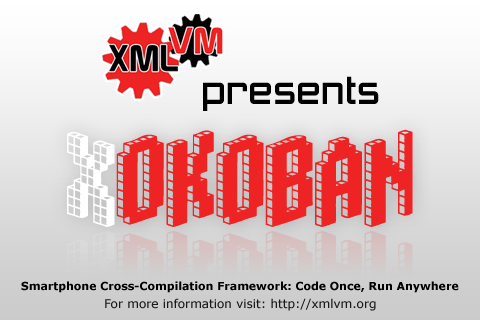
<style>
.page{position:relative;width:480px;height:320px}
.page>*{position:absolute;margin:0}
.t1{font:36px "ZeroTwos";color:#000000}
.t2{font:100px "Blox-(BRK";color:#ee2323}
.t3{font:100px "Blox-(BRK";color:#ffffff}
.t4{font:11px "Verdana-Bold";color:#000000}
.t5{font:12px "Verdana";color:#191919}
</style>
<div class="page">
<p class="t1" style="left:203px;top:76px;width:176px;height:35px">presents</p>
<p class="t2" style="left:67px;top:129px;width:346px;height:98px"><span class="t3">X</span>okoban</p>
<p class="t4" style="left:21px;top:281px;width:438px;height:12px">Smartphone Cross-Compilation Framework: Code Once, Run Anywhere</p>
<p class="t5" style="left:105px;top:298px;width:271px;height:13px">For more information visit: http://xmlvm.org</p>
</div>
